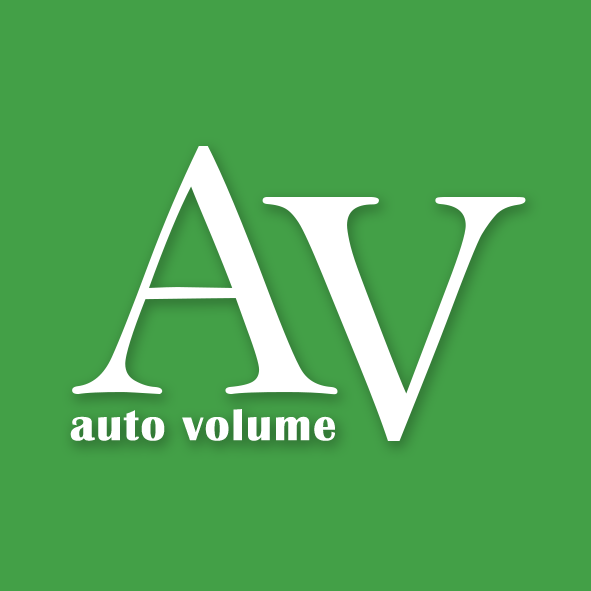
<style>
.page{position:relative;width:591px;height:591px;background:#43a047}
.page>*{position:absolute;margin:0}
.t1{font:376.5px "BellMT";color:#ffffff;scale:1.06 1}
.t2{font:45.9px "BritannicBold";letter-spacing:0.04em;color:#ffffff}
</style>
<div class="page">
<p class="t1" style="left:72px;top:146px;width:266px;height:249px">A</p>
<p class="t1" style="left:262px;top:197px;width:264px;height:244px">V</p>
<p class="t2" style="left:70px;top:409px;width:265px;height:32px">auto volume</p>
</div>
